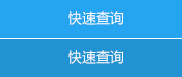
<style>
.page{position:relative;width:182px;height:77px;background:#2192d2}
.page>*{position:absolute;margin:0}
.t1{font:14px "MicrosoftYaHei";color:#ffffff}
</style>
<div class="page">
<p class="t1" style="left:68px;top:11px;width:56px;height:14px">快速查询</p>
<p class="t1" style="left:68px;top:50px;width:56px;height:14px">快速查询</p>
</div>
